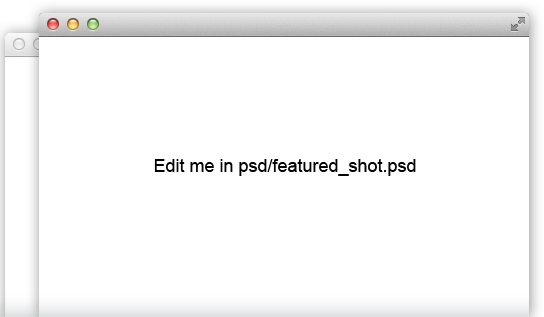
<style>
.page{position:relative;width:544px;height:317px;background:#ffffff}
.page>*{position:absolute;margin:0}
.t1{font:18px "ArialMT";color:#000000}
</style>
<div class="page">
<p class="t1" style="left:154px;top:159px;width:262px;height:17px">Edit me in psd/featured_shot.psd</p>
</div>
